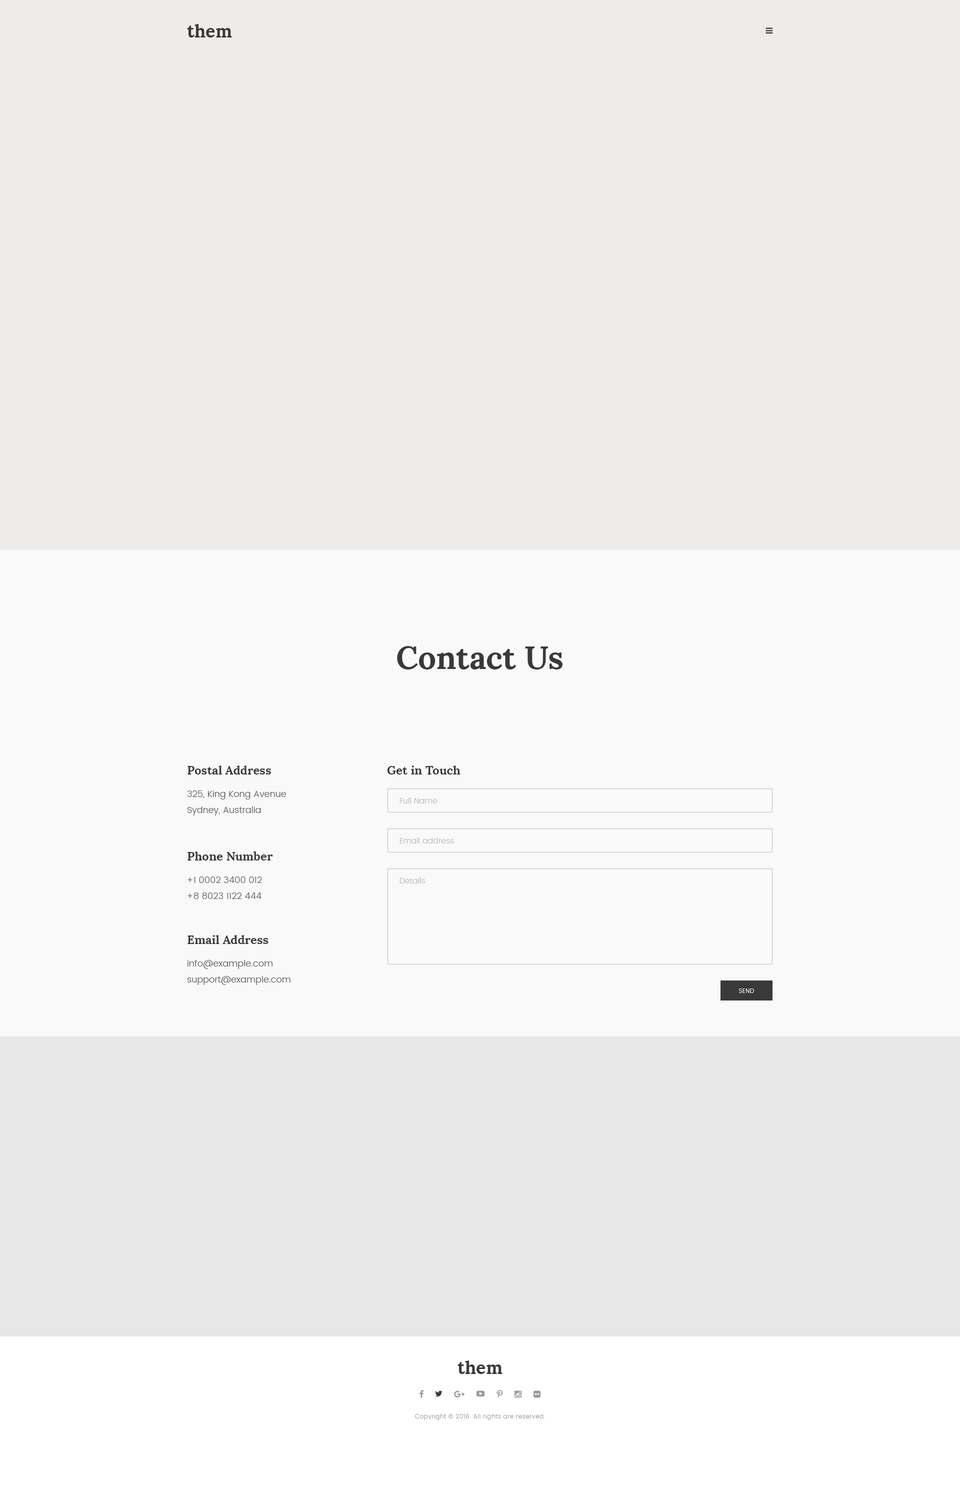
<style>
.page{position:relative;width:960px;height:1500px;background:#efebe9}
.page>*{position:absolute;margin:0}
.t1{font:18px "Lora-Bold";color:#393939}
.t2{font:32px "Lora-Bold";color:#393939}
.t3{font:12px "Lora-Bold";color:#393939}
.t4{font:9px/16px "Poppins-Light";color:#595959}
.t5{font:8px "Poppins-Light";color:#b9b9b9}
.t6{font:6px "Poppins-Light";letter-spacing:0.05em;color:#ffffff;text-transform:uppercase}
.t7{font:6px "Poppins-Light";letter-spacing:0.05em;color:#999999}
.t8{font:6px "OpenSans";letter-spacing:0.05em;color:#999999}
</style>
<div class="page">
<p class="t1" style="left:187px;top:24px;width:45px;height:14px">them</p>
<p class="t2" style="left:397px;top:646px;width:165px;height:24px">Contact Us</p>
<p class="t3" style="left:188px;top:766px;width:83px;height:8px">Postal Address</p>
<p class="t3" style="left:387px;top:766px;width:73px;height:8px">Get in Touch</p>
<p class="t4" style="left:187px;top:790px;width:99px;height:26px">325, King Kong Avenue<br>Sydney, Australia</p>
<p class="t5" style="left:400px;top:798px;width:38px;height:6px">Full Name</p>
<p class="t5" style="left:400px;top:838px;width:54px;height:6px">Email address</p>
<p class="t3" style="left:188px;top:852px;width:85px;height:8px">Phone Number</p>
<p class="t4" style="left:188px;top:876px;width:74px;height:23px">+1 0002 3400 012<br>+8 8023 1122 444</p>
<p class="t5" style="left:400px;top:878px;width:25px;height:6px">Details</p>
<p class="t3" style="left:188px;top:935px;width:80px;height:9px">Email Address</p>
<p class="t4" style="left:188px;top:960px;width:102px;height:25px">info@example.com<br>support@example.com</p>
<p class="t6" style="left:739px;top:988px;width:15px;height:5px">Send</p>
<p class="t1" style="left:458px;top:1360px;width:44px;height:14px">them</p>
<p class="t7" style="left:415px;top:1414px;width:130px;height:6px">Copyright <span class="t8">© </span>2016. All rights are reserved.</p>
</div>
